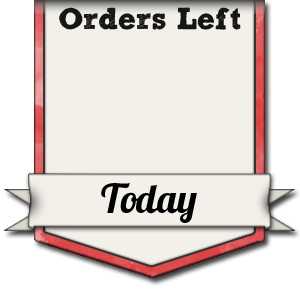
<style>
.page{position:relative;width:300px;height:290px;background:#f2f0e9}
.page>*{position:absolute;margin:0}
.t1{font:30px "SketchRockwell";color:#151515}
.t2{font:40px "Lobster1.3";color:#000000}
</style>
<div class="page">
<p class="t1" style="left:59px;top:7px;width:182px;height:23px">Orders Left</p>
<p class="t2" style="left:101px;top:183px;width:96px;height:40px">Today</p>
</div>
